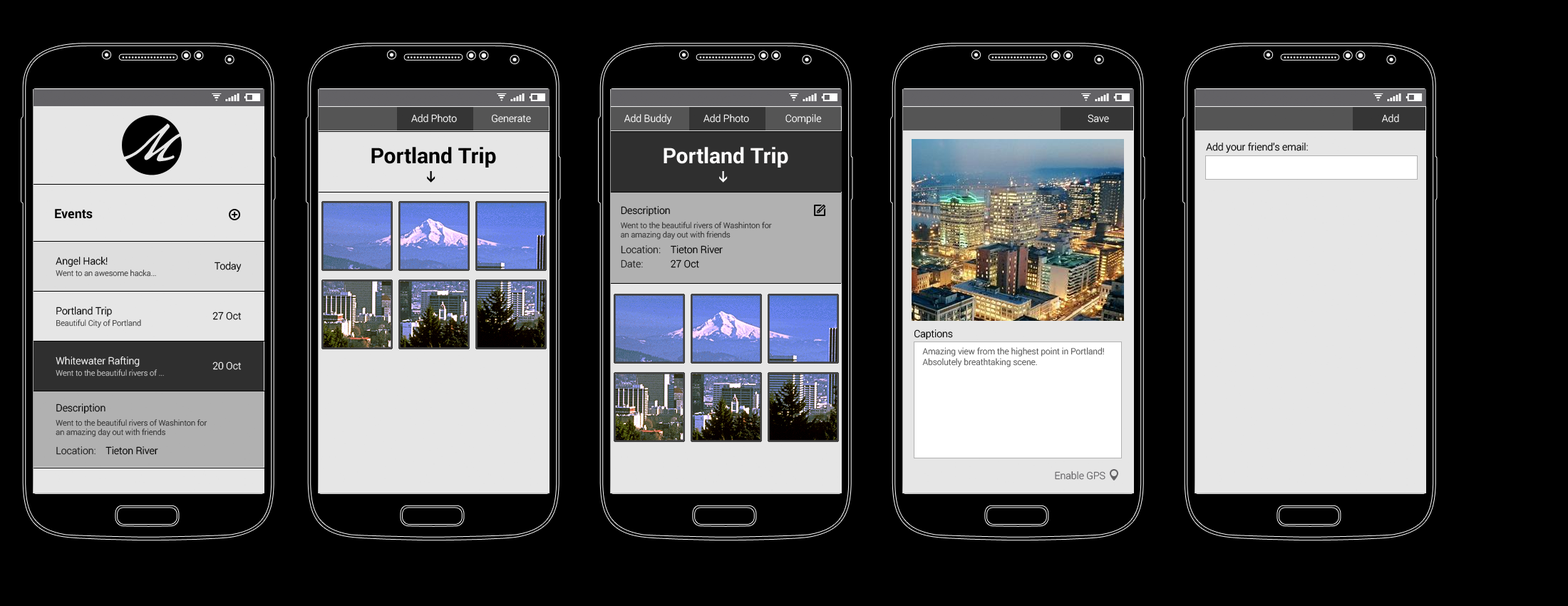
<style>
.page{position:relative;width:1568px;height:606px;background:#000000}
.page>*{position:absolute;margin:0}
.t1{font:42.8px "JaneAusten";color:#e6e6e6}
.t2{font:10px "Roboto-Light";color:#ffffff}
.t3{font:21.4px "Roboto-Bold";color:#000000}
.t4{font:21.4px "Roboto-Bold";color:#fffefe}
.t5{font:10px "Roboto-Light";color:#000000}
.t6{font:12.8px "Roboto-Bold";color:#000000}
.t7{font:7.8px "Roboto-Light"}
.t8{font:10px "Roboto-Light";color:#202020}
.t9{font:10px "Roboto-Light"}
.t10{font:8.6px "Roboto-Light";color:#555555}
.t11{font:10px "Roboto-Light";color:#636265}
</style>
<div class="page">
<p class="t1" style="left:115px;top:123px;width:67px;height:39px">M</p>
<p class="t2" style="left:411px;top:114px;width:46px;height:9px">Add Photo</p>
<p class="t2" style="left:492px;top:114px;width:39px;height:9px">Generate</p>
<p class="t2" style="left:624px;top:114px;width:48px;height:11px">Add Buddy</p>
<p class="t2" style="left:703px;top:114px;width:46px;height:9px">Add Photo</p>
<p class="t2" style="left:785px;top:114px;width:37px;height:10px">Compile</p>
<p class="t2" style="left:1088px;top:114px;width:21px;height:9px">Save</p>
<p class="t2" style="left:1382px;top:114px;width:17px;height:9px">Add</p>
<p class="t3" style="left:371px;top:147px;width:125px;height:20px">Portland Trip</p>
<p class="t4" style="left:664px;top:147px;width:124px;height:20px">Portland Trip</p>
<p class="t5" style="left:1206px;top:143px;width:102px;height:10px">Add your friend’s email:</p>
<p class="t6" style="left:55px;top:209px;width:38px;height:10px">Events</p>
<p class="t5" style="left:621px;top:206px;width:49px;height:10px">Description</p>
<p class="t7" style="left:621px;top:222px;width:151px;height:17px">Went to the beautiful rivers of Washinton for<br>an amazing day out with friends</p>
<p class="t8" style="left:621px;top:245px;width:40px;height:9px">Location:</p>
<p class="t5" style="left:671px;top:245px;width:52px;height:9px">Tieton River</p>
<p class="t5" style="left:56px;top:257px;width:52px;height:10px">Angel Hack!</p>
<p class="t7" style="left:56px;top:269px;width:100px;height:8px">Went to an awesome hacka...</p>
<p class="t5" style="left:215px;top:262px;width:27px;height:10px">Today</p>
<p class="t9" style="left:621px;top:259px;width:22px;height:9px">Date:</p>
<p class="t5" style="left:671px;top:259px;width:28px;height:9px">27 Oct</p>
<p class="t5" style="left:56px;top:306px;width:56px;height:10px">Portland Trip</p>
<p class="t5" style="left:212px;top:311px;width:30px;height:9px">27 Oct</p>
<p class="t7" style="left:56px;top:319px;width:85px;height:9px">Beautiful City of Portland</p>
<p class="t5" style="left:914px;top:329px;width:39px;height:10px">Captions</p>
<p class="t10" style="left:922px;top:347px;width:182px;height:20px">Amazing view from the highest point in Portland! Absolutely breathtaking scene.</p>
<p class="t2" style="left:56px;top:356px;width:84px;height:11px">Whitewater Rafting</p>
<p class="t2" style="left:212px;top:361px;width:30px;height:9px">20 Oct</p>
<p class="t7" style="left:56px;top:369px;width:108px;height:7px">Went to the beautiful rivers of ...</p>
<p class="t5" style="left:56px;top:403px;width:49px;height:10px">Description</p>
<p class="t7" style="left:56px;top:419px;width:151px;height:18px">Went to the beautiful rivers of Washinton for<br>an amazing day out with friends</p>
<p class="t8" style="left:56px;top:446px;width:40px;height:9px">Location:</p>
<p class="t5" style="left:105px;top:446px;width:53px;height:9px">Tieton River</p>
<p class="t11" style="left:1055px;top:471px;width:50px;height:9px">Enable GPS</p>
</div>
